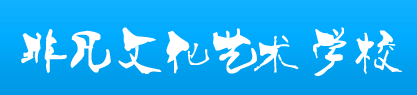
<style>
.page{position:relative;width:417px;height:95px}
.page>*{position:absolute;margin:0}
.t1{font:48px "ÁõµÂ»ª×ÖÌåÒ¶¸ùÓÑ·Â°æ";letter-spacing:0.005em;color:#ffffff}
</style>
<div class="page">
<p class="t1" style="left:21px;top:27px;width:381px;height:49px">非凡文化艺术学校</p>
</div>
